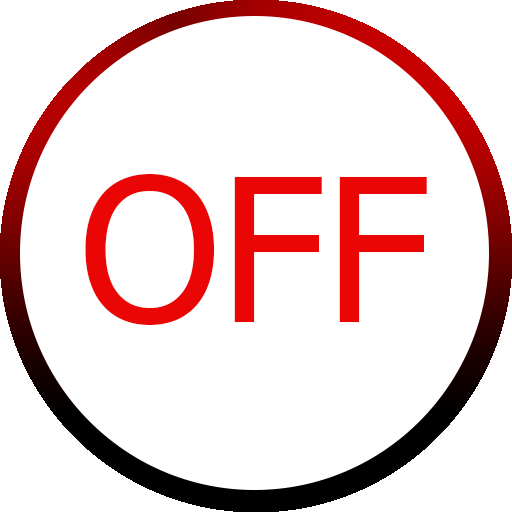
<style>
.page{position:relative;width:512px;height:512px;background:#ffffff}
.page>*{position:absolute;margin:0}
.t1{font:200px "Tahoma";color:#eb0606}
</style>
<div class="page">
<p class="t1" style="left:85px;top:173px;width:342px;height:152px">OFF</p>
</div>
